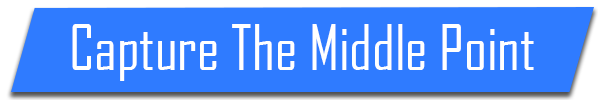
<style>
.page{position:relative;width:598px;height:100px;background:#2f7bff}
.page>*{position:absolute;margin:0}
.t1{font:60px "AgencyFB-Reg";color:#ffffff}
</style>
<div class="page">
<p class="t1" style="left:72px;top:24px;width:462px;height:57px">Capture The Middle Point</p>
</div>
